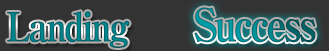
<style>
.page{position:relative;width:329px;height:51px;background:#333333}
.page>*{position:absolute;margin:0}
.t1{font:40px "RyuminPro-ExBold";letter-spacing:-0.08em;color:#007980;scale:0.9 1}
.t2{font:45px "RyuminPro-ExBold";letter-spacing:-0.08em;scale:0.9 1}
</style>
<div class="page">
<p class="t1" style="left:7px;top:11px;width:123px;height:37px">Landing</p>
<p class="t2" style="left:194px;top:7px;width:122px;height:36px">Success</p>
</div>
